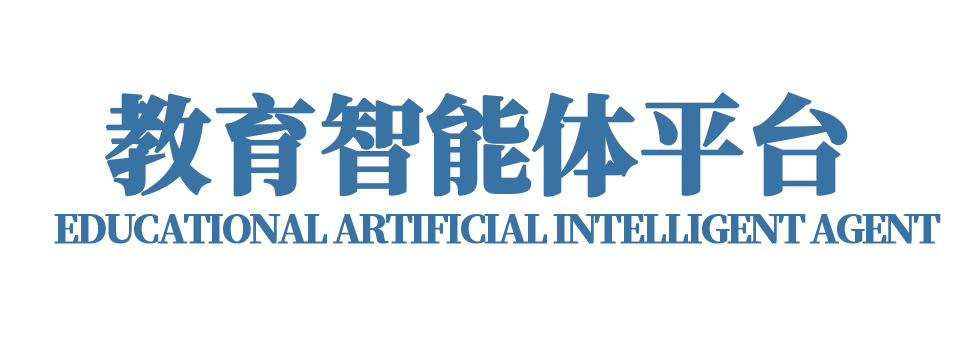
<style>
.page{position:relative;width:960px;height:340px;background:#ffffff}
.page>*{position:absolute;margin:0}
.t1{font:106px "SourceHanSerifSC-Heavy";letter-spacing:-0.02em;color:#3973a4;font-weight:bold}
.t2{font:38.1px "SourceHanSerifSC-Heavy";letter-spacing:-0.1em;color:#3973a4;font-weight:bold}
</style>
<div class="page">
<p class="t1" style="left:105px;top:92px;width:743px;height:106px">教育智能体平台</p>
<p class="t2" style="left:54px;top:214px;width:887px;height:30px">EDUCATIONAL ARTIFICIAL INTELLIGENT AGENT</p>
</div>
